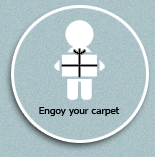
<style>
.page{position:relative;width:155px;height:157px}
.page>*{position:absolute;margin:0}
.t1{font:10px "Tahoma";color:#000000}
</style>
<div class="page">
<p class="t1" style="left:39px;top:107px;width:81px;height:9px">Engoy your carpet</p>
</div>
